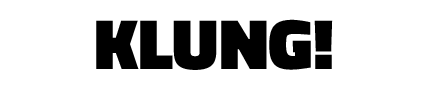
<style>
.page{position:relative;width:428px;height:90px;background:#ffffff}
.page>*{position:absolute;margin:0}
.t1{font:72px "TitilliumWeb-Black";color:#000000}
</style>
<div class="page">
<p class="t1" style="left:96px;top:19px;width:237px;height:51px">KLUNG!</p>
</div>
